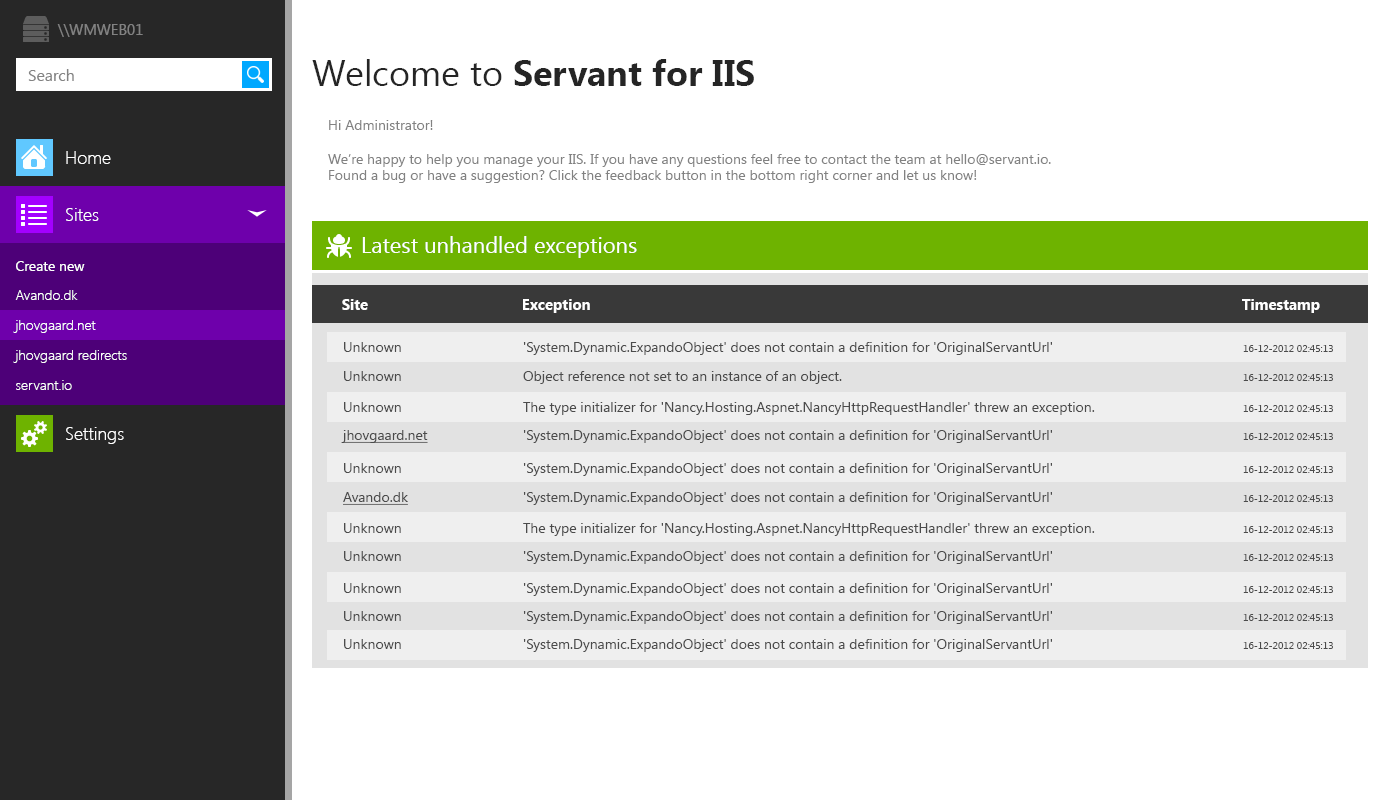
<style>
.page{position:relative;width:1400px;height:800px;background:#ffffff}
.page>*{position:absolute;margin:0}
.t1{font:15px "SegoeUI";color:#828282}
.t2{font:36px "SegoeUI-Bold";color:#252525}
.t3{font:36px "SegoeUI";color:#252525}
.t4{font:16px "SegoeUI";color:#828282}
.t5{font:14px "SegoeUI";color:#828282}
.t6{font:18px "SegoeUI-Light";color:#ffffff}
.t7{font:22px "SegoeUI";color:#ffffff}
.t8{font:14px/30px "SegoeUI-Light";color:#ffffff}
.t9{font:14px/30px "SegoeUI";color:#ffffff}
.t10{font:15px "SegoeUI-Bold";color:#ffffff}
.t11{font:14px "SegoeUI";color:#4b4b4b}
.t12{font:10px "SegoeUI";color:#4b4b4b}
.t13{font:14px "SegoeUI";color:#4b4b4b;text-decoration:underline}
</style>
<div class="page">
<p class="t1" style="left:57px;top:24px;width:86px;height:13px">\\WMWEB01</p>
<p class="t2" style="left:312px;top:59px;width:442px;height:27px"><span class="t3">Welcome to </span>Servant for IIS</p>
<p class="t4" style="left:28px;top:69px;width:46px;height:12px">Search</p>
<p class="t5" style="left:328px;top:120px;width:723px;height:63px">Hi Administrator!<br><br>We’re happy to help you manage your IIS. If you have any questions feel free to contact the team at hello@servant.io. <br>Found a bug or have a suggestion? Click the feedback button in the bottom right corner and let us know!</p>
<p class="t6" style="left:66px;top:151px;width:45px;height:13px">Home</p>
<p class="t6" style="left:66px;top:208px;width:33px;height:13px">Sites</p>
<p class="t7" style="left:362px;top:236px;width:275px;height:22px">Latest unhandled exceptions</p>
<p class="t8" style="left:13px;top:261px;width:114px;height:129px"><span class="t9">Create new<br></span>Avando.dk<br>jhovgaard.net<br>jhovgaard redirects<br>servant.io</p>
<p class="t10" style="left:342px;top:299px;width:978px;height:14px">Site     Exception                   Timestamp</p>
<p class="t11" style="left:344px;top:342px;width:989px;height:13px">Unknown    'System.Dynamic.ExpandoObject' does not contain a definition for 'OriginalServantUrl'      <span class="t12">16-12-2012 02:45:13</span></p>
<p class="t11" style="left:344px;top:371px;width:989px;height:13px">Unknown    Object reference not set to an instance of an object.            <span class="t12">16-12-2012 02:45:13</span></p>
<p class="t11" style="left:344px;top:402px;width:989px;height:13px">Unknown    The type initializer for 'Nancy.Hosting.Aspnet.NancyHttpRequestHandler' threw an exception.     <span class="t12">16-12-2012 02:45:13</span></p>
<p class="t6" style="left:66px;top:427px;width:58px;height:17px">Settings</p>
<p class="t11" style="left:341px;top:430px;width:992px;height:13px"><span class="t13">jhovgaard.net</span>   'System.Dynamic.ExpandoObject' does not contain a definition for 'OriginalServantUrl'      <span class="t12">16-12-2012 02:45:13</span></p>
<p class="t11" style="left:344px;top:463px;width:989px;height:13px">Unknown    'System.Dynamic.ExpandoObject' does not contain a definition for 'OriginalServantUrl'      <span class="t12">16-12-2012 02:45:13</span></p>
<p class="t11" style="left:343px;top:492px;width:990px;height:13px"><span class="t13">Avando.dk</span>    'System.Dynamic.ExpandoObject' does not contain a definition for 'OriginalServantUrl'      <span class="t12">16-12-2012 02:45:13</span></p>
<p class="t11" style="left:344px;top:523px;width:989px;height:13px">Unknown    The type initializer for 'Nancy.Hosting.Aspnet.NancyHttpRequestHandler' threw an exception.     <span class="t12">16-12-2012 02:45:13</span></p>
<p class="t11" style="left:344px;top:551px;width:989px;height:13px">Unknown    'System.Dynamic.ExpandoObject' does not contain a definition for 'OriginalServantUrl'      <span class="t12">16-12-2012 02:45:13</span></p>
<p class="t11" style="left:344px;top:583px;width:989px;height:13px">Unknown    'System.Dynamic.ExpandoObject' does not contain a definition for 'OriginalServantUrl'      <span class="t12">16-12-2012 02:45:13</span></p>
<p class="t11" style="left:344px;top:611px;width:989px;height:13px">Unknown    'System.Dynamic.ExpandoObject' does not contain a definition for 'OriginalServantUrl'      <span class="t12">16-12-2012 02:45:13</span></p>
<p class="t11" style="left:344px;top:639px;width:989px;height:13px">Unknown    'System.Dynamic.ExpandoObject' does not contain a definition for 'OriginalServantUrl'      <span class="t12">16-12-2012 02:45:13</span></p>
</div>
